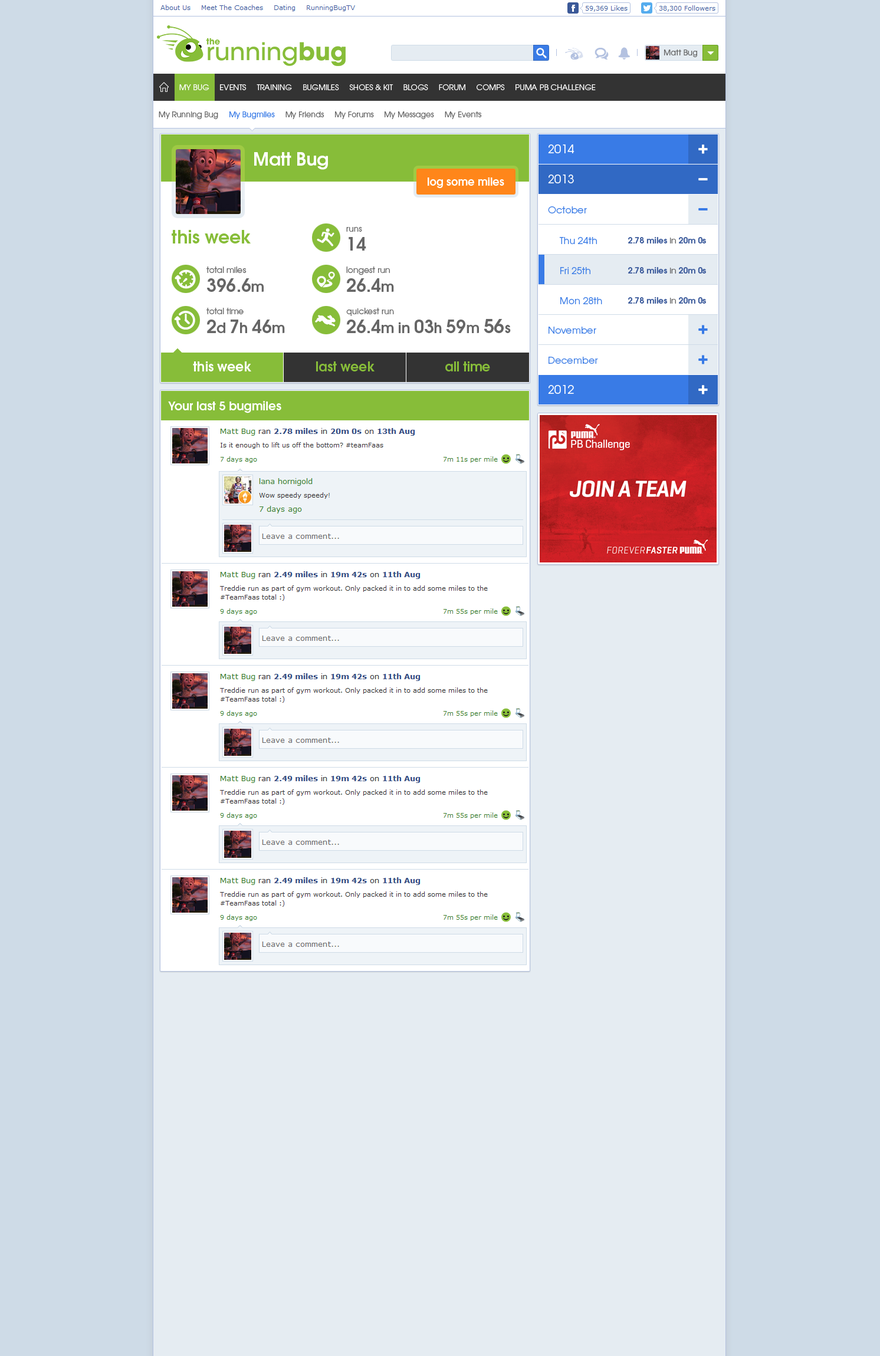
<style>
.page{position:relative;width:880px;height:1356px;background:#cedbe7}
.page>*{position:absolute;margin:0}
.t1{font:7.7px "TeXGyreAdventor-Regular";color:#666666}
.t2{font:7.7px "TeXGyreAdventor-Regular";color:#ffffff;text-transform:uppercase}
.t3{font:7.7px "TeXGyreAdventor-Regular";color:#397be6}
.t4{font:11.8px "TeXGyreAdventor-Regular";color:#ffffff}
.t5{font:17.7px "TeXGyreAdventor-Bold";color:#ffffff}
.t6{font:10.6px "TeXGyreAdventor-Bold";color:#ffffff}
.t7{font:9.4px "TeXGyreAdventor-Regular";color:#397be6}
.t8{font:17.7px "TeXGyreAdventor-Bold";color:#87bd39}
.t9{font:8.3px/18.9px "TeXGyreAdventor-Regular";color:#666666}
.t10{font:17.7px/18.9px "TeXGyreAdventor-Bold";color:#666666}
.t11{font:8.3px "TeXGyreAdventor-Bold";color:#3b5a9b}
.t12{font:8.3px "TeXGyreAdventor-Regular";color:#666666}
.t13{font:14.1px/18.9px "TeXGyreAdventor-Bold";color:#666666}
.t14{font:18.9px/17.7px "TeXGyreAdventor-Bold";color:#666666}
.t15{font:13px "TeXGyreAdventor-Bold";color:#ffffff}
.t16{font:13px "TeXGyreAdventor-Bold";color:#87bd39}
.t17{font:11.8px "TeXGyreAdventor-Bold";color:#ffffff}
</style>
<div class="page">
<p class="t1" style="left:664px;top:50px;width:33px;height:7px">Matt Bug</p>
<p class="t2" style="left:179px;top:84px;width:416px;height:6px">My Bug     Events     Training     Bugmiles     Shoes &amp; Kit     Blogs     Forum     Comps     Puma PB Challenge</p>
<p class="t1" style="left:159px;top:111px;width:323px;height:8px">My Running Bug     <span class="t3">My Bugmiles</span>     My Friends     My Forums     My Messages     My Events</p>
<p class="t4" style="left:548px;top:144px;width:26px;height:9px">2014</p>
<p class="t5" style="left:254px;top:152px;width:74px;height:18px">Matt Bug</p>
<p class="t6" style="left:427px;top:177px;width:77px;height:11px">log some miles</p>
<p class="t4" style="left:548px;top:174px;width:26px;height:9px">2013</p>
<p class="t7" style="left:548px;top:206px;width:39px;height:7px">October</p>
<p class="t8" style="left:172px;top:230px;width:79px;height:13px">this week</p>
<p class="t9" style="left:346px;top:227px;width:20px;height:24px">runs<br><span class="t10">14</span></p>
<p class="t7" style="left:559px;top:237px;width:38px;height:7px">Thu 24th</p>
<p class="t11" style="left:628px;top:237px;width:78px;height:7px">2.78 miles <span class="t12">in </span>20m 0s</p>
<p class="t9" style="left:206px;top:266px;width:57px;height:26px">total miles<br><span class="t10">396.6</span><span class="t13">m</span></p>
<p class="t9" style="left:346px;top:266px;width:48px;height:26px">longest run<br><span class="t10">26.4</span><span class="t13">m</span></p>
<p class="t7" style="left:560px;top:267px;width:30px;height:7px">Fri 25th</p>
<p class="t11" style="left:628px;top:267px;width:78px;height:7px">2.78 miles <span class="t12">in </span>20m 0s</p>
<p class="t7" style="left:560px;top:297px;width:42px;height:8px">Mon 28th</p>
<p class="t11" style="left:628px;top:297px;width:78px;height:7px">2.78 miles <span class="t12">in </span>20m 0s</p>
<p class="t9" style="left:206px;top:308px;width:79px;height:25px">total time<br><span class="t10">2</span><span class="t13">d </span><span class="t10">7</span><span class="t13">h </span><span class="t10">46</span><span class="t13">m</span></p>
<p class="t9" style="left:346px;top:308px;width:164px;height:25px">quickest run<br><span class="t10">26.4</span><span class="t13">m in </span><span class="t10">03</span><span class="t13">h </span><span class="t10">59</span><span class="t13">m </span><span class="t14">56</span><span class="t13">s</span></p>
<p class="t7" style="left:548px;top:327px;width:48px;height:7px">November</p>
<p class="t15" style="left:193px;top:361px;width:58px;height:10px">this week</p>
<p class="t16" style="left:316px;top:361px;width:58px;height:10px">last week</p>
<p class="t16" style="left:445px;top:361px;width:45px;height:10px">all time</p>
<p class="t7" style="left:548px;top:357px;width:50px;height:7px">December</p>
<p class="t4" style="left:548px;top:385px;width:26px;height:9px">2012</p>
<p class="t17" style="left:168px;top:401px;width:113px;height:12px">Your last 5 bugmiles</p>
</div>
